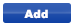
<style>
.page{position:relative;width:75px;height:25px;background:#ffffff}
.page>*{position:absolute;margin:0}
.t1{font:11.2px "Arial-Black";color:#ffffff}
</style>
<div class="page">
<p class="t1" style="left:24px;top:9px;width:24px;height:10px">Add</p>
</div>
